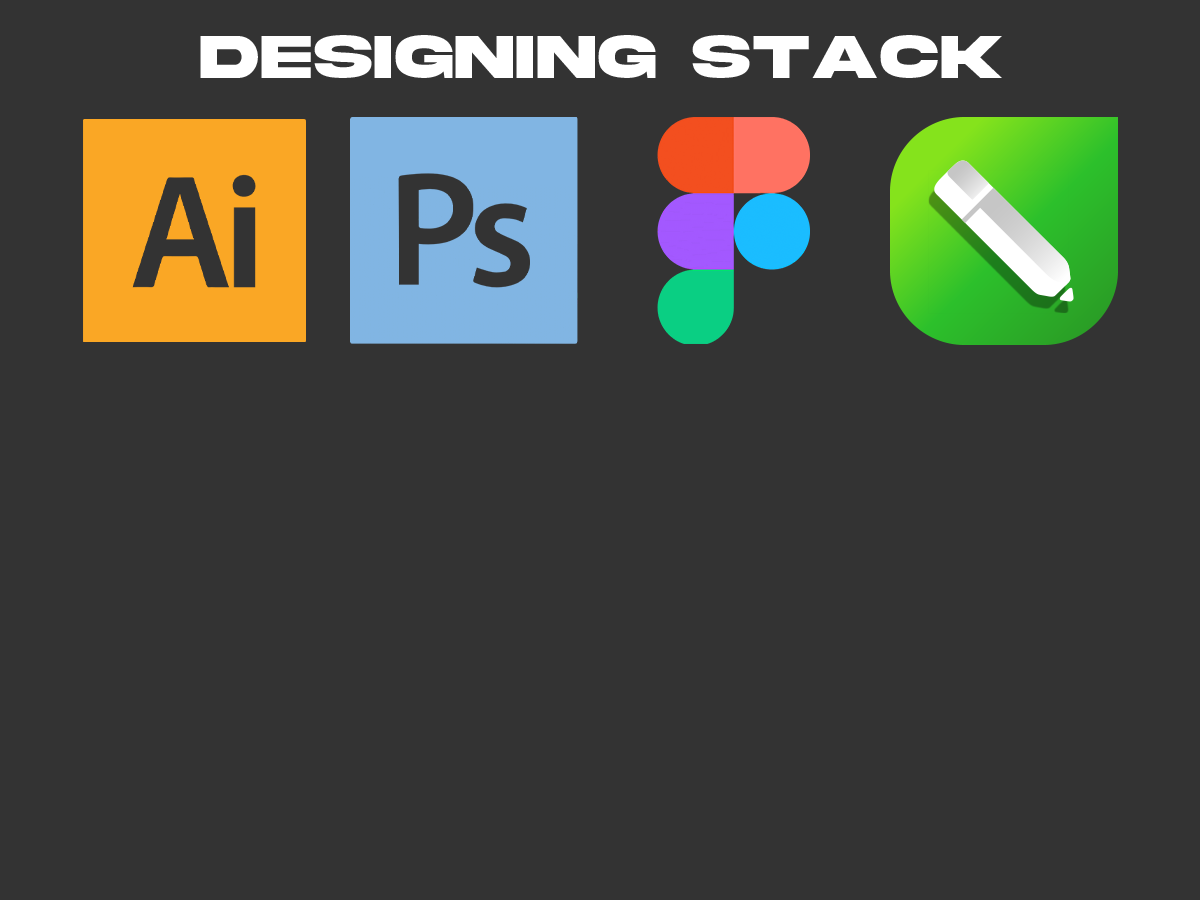
<style>
.page{position:relative;width:1200px;height:900px;background:#333333}
.page>*{position:absolute;margin:0}
.t1{font:63.9px "AkiraExpanded-SuperBold";letter-spacing:0.04em;color:#ffffff}
</style>
<div class="page">
<p class="t1" style="left:200px;top:35px;width:802px;height:43px">designing stack</p>
</div>
